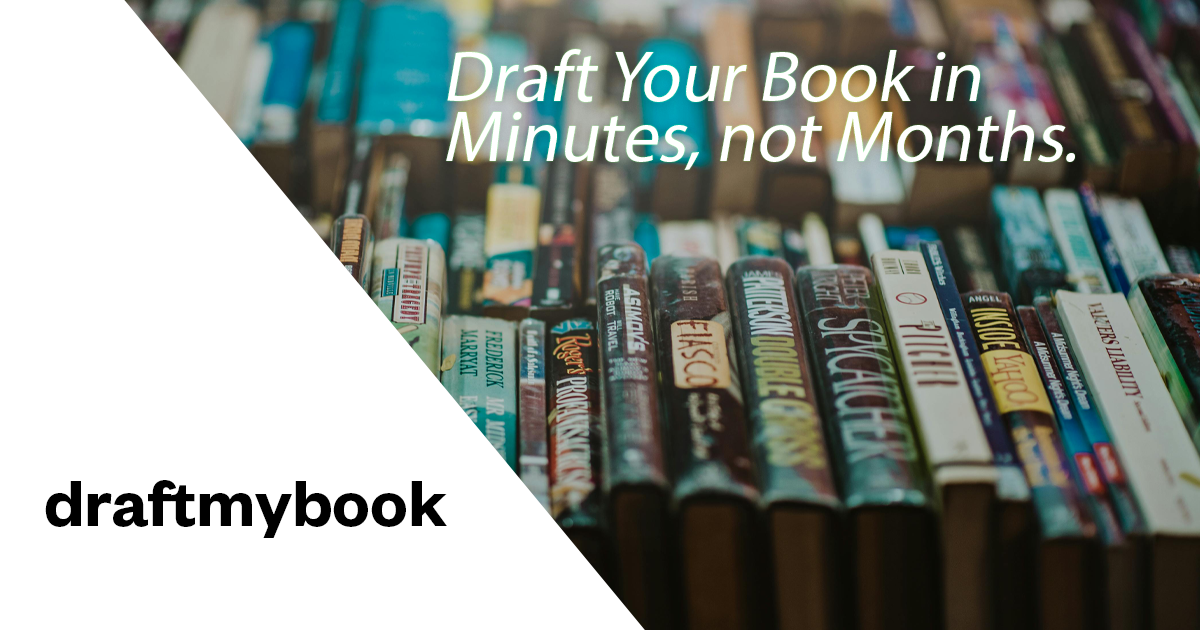
<style>
.page{position:relative;width:1200px;height:630px;background:#ffffff}
.page>*{position:absolute;margin:0}
.t1{font:72px/60px "MyriadPro-Regular";color:#ffffff;font-style:italic}
.t2{font:72px "FoundersGrotesk-Semibold";color:#000000}
</style>
<div class="page">
<p class="t1" style="left:446px;top:49px;width:629px;height:121px">Draft Your Book in <br>Minutes, not Months.</p>
<p class="t2" style="left:45px;top:480px;width:402px;height:58px">draftmybook</p>
</div>
